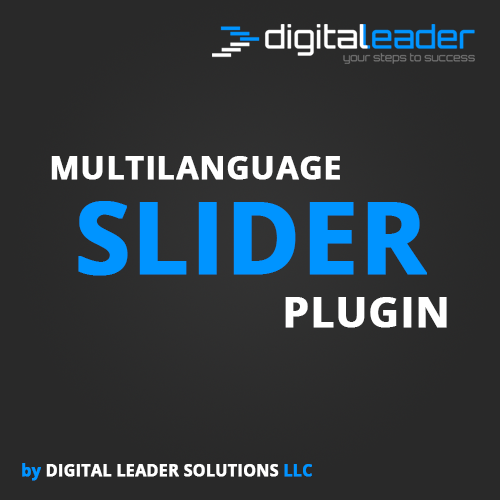
<style>
.page{position:relative;width:500px;height:500px;background:#292929}
.page>*{position:absolute;margin:0}
.t1{font:32.4px "OpenSans-Bold";color:#ffffff;text-transform:uppercase;font-weight:bold}
.t2{font:98.8px "OpenSans-Bold";color:#0094ff;font-weight:bold}
.t3{font:42.5px "OpenSans-Bold";color:#ffffff;text-transform:uppercase;font-weight:bold}
.t4{font:15.9px "OpenSans-Bold";color:#ffffff;font-weight:bold}
.t5{font:15.9px "OpenSans-Bold";color:#0094ff;font-weight:bold}
</style>
<div class="page">
<p class="t1" style="left:51px;top:156px;width:289px;height:24px">multilanguage</p>
<p class="t2" style="left:78px;top:201px;width:349px;height:75px">SLIDER</p>
<p class="t3" style="left:285px;top:297px;width:162px;height:31px">plugin</p>
<p class="t4" style="left:22px;top:463px;width:290px;height:18px"><span class="t5">by </span>DIGITAL LEADER SOLUTIONS<span class="t5"> LLC</span></p>
</div>
